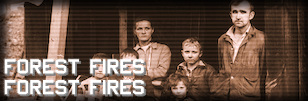
<style>
.page{position:relative;width:308px;height:101px}
.page>*{position:absolute;margin:0}
.t1{font:17.3px "ACES_MIL-STD-2161C";color:#ffffff}
</style>
<div class="page">
<p class="t1" style="left:4px;top:59px;width:140px;height:36px">forest fires<br>forest fires</p>
</div>
